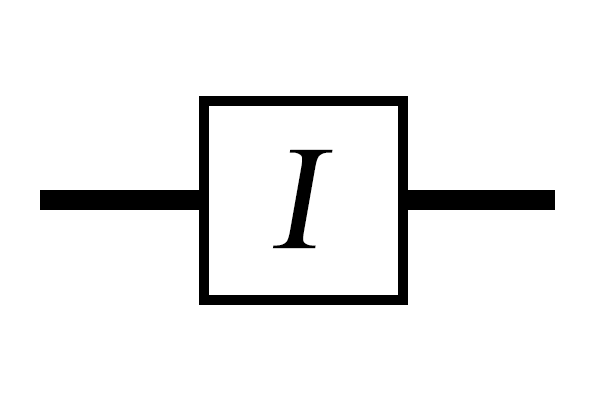
<style>
.page{position:relative;width:600px;height:400px;background:#ffffff}
.page>*{position:absolute;margin:0}
.t1{font:148.5px "TimesNewRomanPSMT";color:#000000;font-style:italic}
</style>
<div class="page">
<p class="t1" style="left:272px;top:149px;width:61px;height:100px">I</p>
</div>
